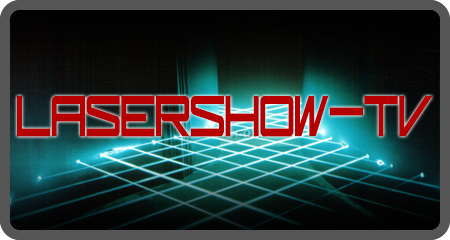
<style>
.page{position:relative;width:450px;height:240px}
.page>*{position:absolute;margin:0}
.t1{font:54.6px "kaufhalle";color:#b50101;scale:0.62 1}
</style>
<div class="page">
<p class="t1" style="left:17px;top:96px;width:416px;height:41px">LASERSHOW-TV</p>
</div>
